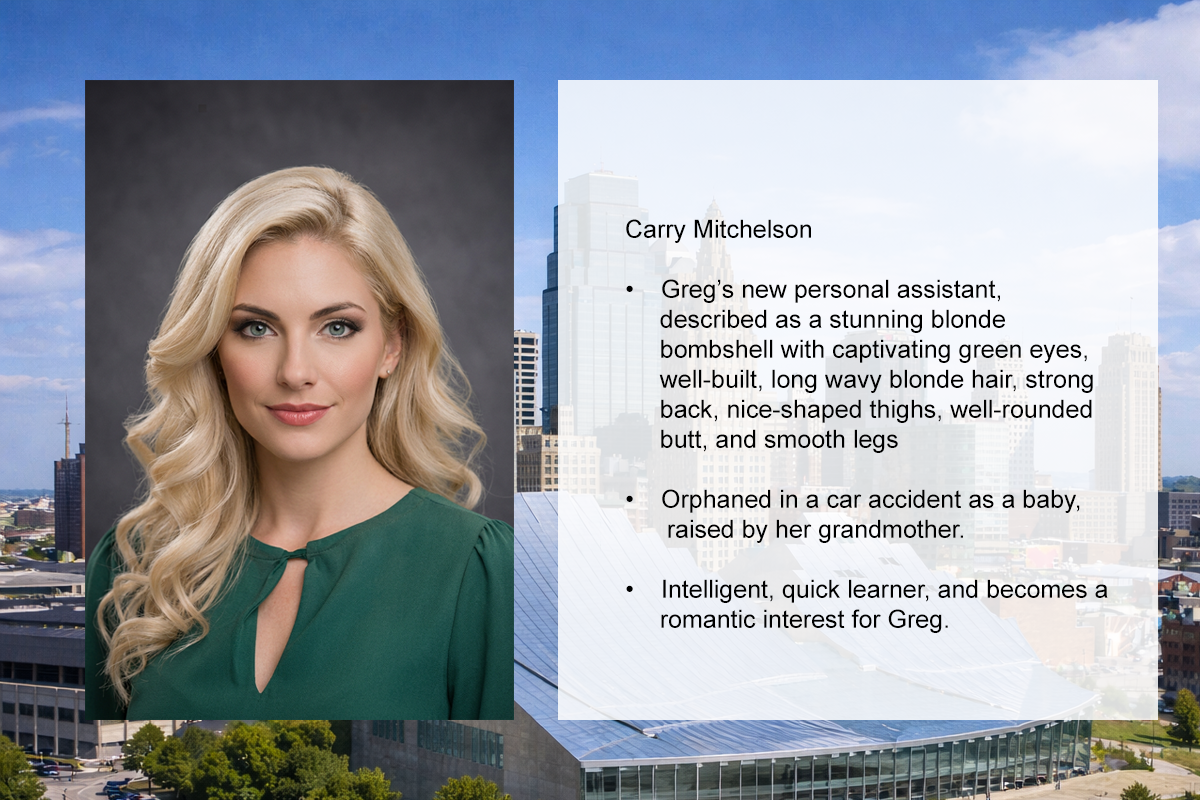
<style>
.page{position:relative;width:1200px;height:800px}
.page>*{position:absolute;margin:0}
.t1{font:25px "ArialMT";color:#000000}
</style>
<div class="page">
<p class="t1" style="left:626px;top:219px;width:482px;height:414px">Carry Mitchelson<br><br>• Greg’s new personal assistant, <br>     described as a stunning blonde <br>     bombshell with captivating green eyes, <br>     well-built, long wavy blonde hair, strong <br>     back, nice-shaped thighs, well-rounded <br>     butt, and smooth legs<br><br>• Orphaned in a car accident as a baby, <br>      raised by her grandmother.<br><br>• Intelligent, quick learner, and becomes a <br>     romantic interest for Greg.</p>
</div>
